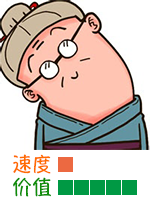
<style>
.page{position:relative;width:150px;height:200px;background:#ffffff}
.page>*{position:absolute;margin:0}
.t1{font:20px "HannotateSC-W7";color:#ff6c00}
.t2{font:20px "HannotateSC-W7";color:#0e8d08}
</style>
<div class="page">
<p class="t1" style="left:13px;top:154px;width:38px;height:20px">速度</p>
<p class="t2" style="left:13px;top:177px;width:38px;height:20px">价值</p>
</div>
